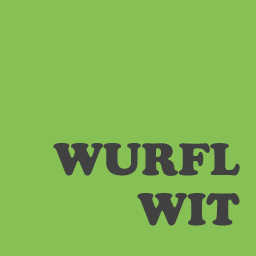
<style>
.page{position:relative;width:256px;height:256px;background:#87c055}
.page>*{position:absolute;margin:0}
.t1{font:45px/50px "CooperBlackStd";color:#414142}
</style>
<div class="page">
<p class="t1" style="left:53px;top:143px;width:187px;height:83px;text-align:right">WURFL<br>WIT</p>
</div>
